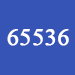
<style>
.page{position:relative;width:75px;height:75px;background:#3654b6}
.page>*{position:absolute;margin:0}
.t1{font:24px "TimesNewRomanPSMT";color:#ffffff;font-weight:bold}
</style>
<div class="page">
<p class="t1" style="left:7px;top:29px;width:62px;height:17px">65536</p>
</div>
